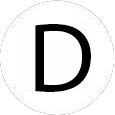
<style>
.page{position:relative;width:115px;height:115px;background:#ffffff}
.page>*{position:absolute;margin:0}
.t1{font:100px "MyriadPro-Regular";color:#000000}
</style>
<div class="page">
<p class="t1" style="left:35px;top:24px;width:56px;height:68px">D</p>
</div>
